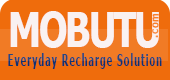
<style>
.page{position:relative;width:170px;height:80px;background:#ef6c0c}
.page>*{position:absolute;margin:0}
.t1{font:48px "Tahoma-Bold";letter-spacing:-0.065em;color:#f9f1f1;scale:0.78 1}
.t2{font:10.5px "Tahoma-Bold";letter-spacing:0.08em;color:#f8812a;scale:0.88 1}
.t3{font:11.4px "Tahoma-Bold";letter-spacing:0.08em;color:#f8812a;scale:0.88 1}
.t4{font:15.5px "Tahoma-Bold";letter-spacing:0.1em;scale:0.6 1}
</style>
<div class="page">
<p class="t1" style="left:10px;top:11px;width:149px;height:37px">MOBUTU</p>
<p class="t2" style="left:152px;top:13px;width:7px;height:25px;rotate:-88deg"><span class="t3">.</span>com</p>
<p class="t4" style="left:8px;top:53px;width:154px;height:16px">Everyday Recharge Solution</p>
</div>
